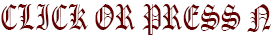
<style>
.page{position:relative;width:272px;height:38px;background:#ffffff}
.page>*{position:absolute;margin:0}
.t1{font:35.2px "OldEnglishTextMT";color:#630000;scale:0.69 1}
</style>
<div class="page">
<p class="t1" style="left:1px;top:4px;width:270px;height:31px">CLICK OR PRESS N</p>
</div>
